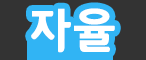
<style>
.page{position:relative;width:146px;height:60px;background:#333333}
.page>*{position:absolute;margin:0}
.t1{font:48px "12LotteMartHappyBold";letter-spacing:0.05em;color:#ffffff;text-transform:uppercase}
</style>
<div class="page">
<p class="t1" style="left:31px;top:8px;width:84px;height:45px">자율</p>
</div>
